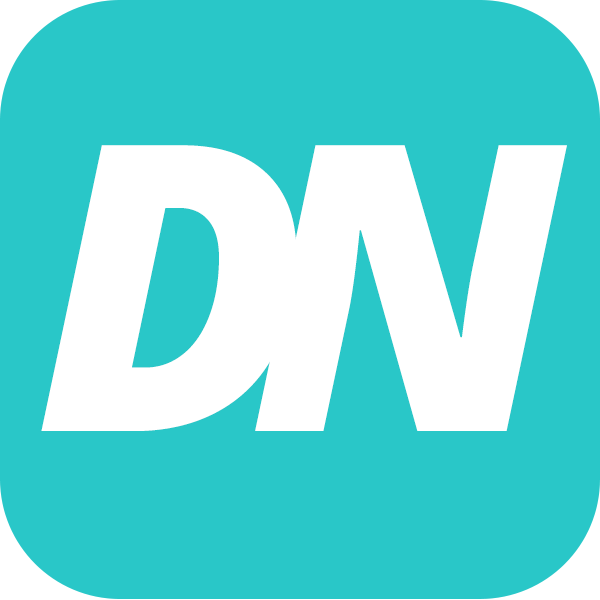
<style>
.page{position:relative;width:600px;height:600px;background:#29c7c8}
.page>*{position:absolute;margin:0}
.t1{font:400px "OpenSans-ExtraboldItalic";letter-spacing:-0.15em;color:#ffffff}
</style>
<div class="page">
<p class="t1" style="left:41px;top:145px;width:526px;height:286px">DN</p>
</div>
